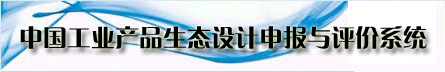
<style>
.page{position:relative;width:445px;height:72px}
.page>*{position:absolute;margin:0}
.t1{font:24px "FZCQJW--GB1-0";color:#010300}
</style>
<div class="page">
<p class="t1" style="left:20px;top:26px;width:407px;height:23px">中国工业产品生态设计申报与评价系统</p>
</div>
